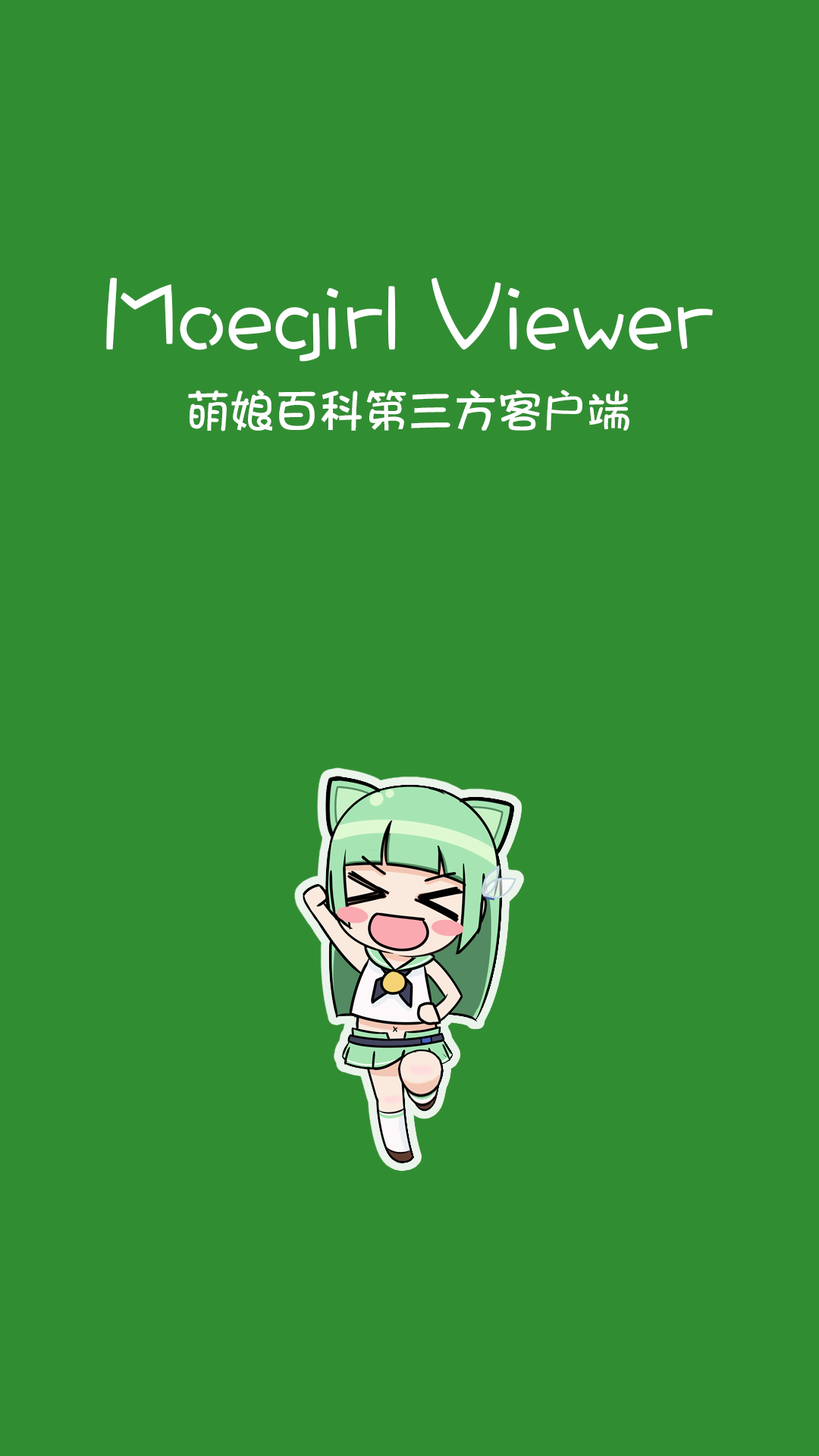
<style>
.page{position:relative;width:819px;height:1456px;background:#318d32}
.page>*{position:absolute;margin:0}
.t1{font:100.2px "DFWaWa-W5-WINP-BF";color:#ffffff;scale:0.9 1}
.t2{font:43.5px "STHeitiSC-Light";color:#ffffff}
</style>
<div class="page">
<p class="t1" style="left:106px;top:278px;width:607px;height:84px">Moegirl Viewer</p>
<p class="t2" style="left:188px;top:390px;width:441px;height:41px">萌娘百科第三方客户端</p>
</div>
